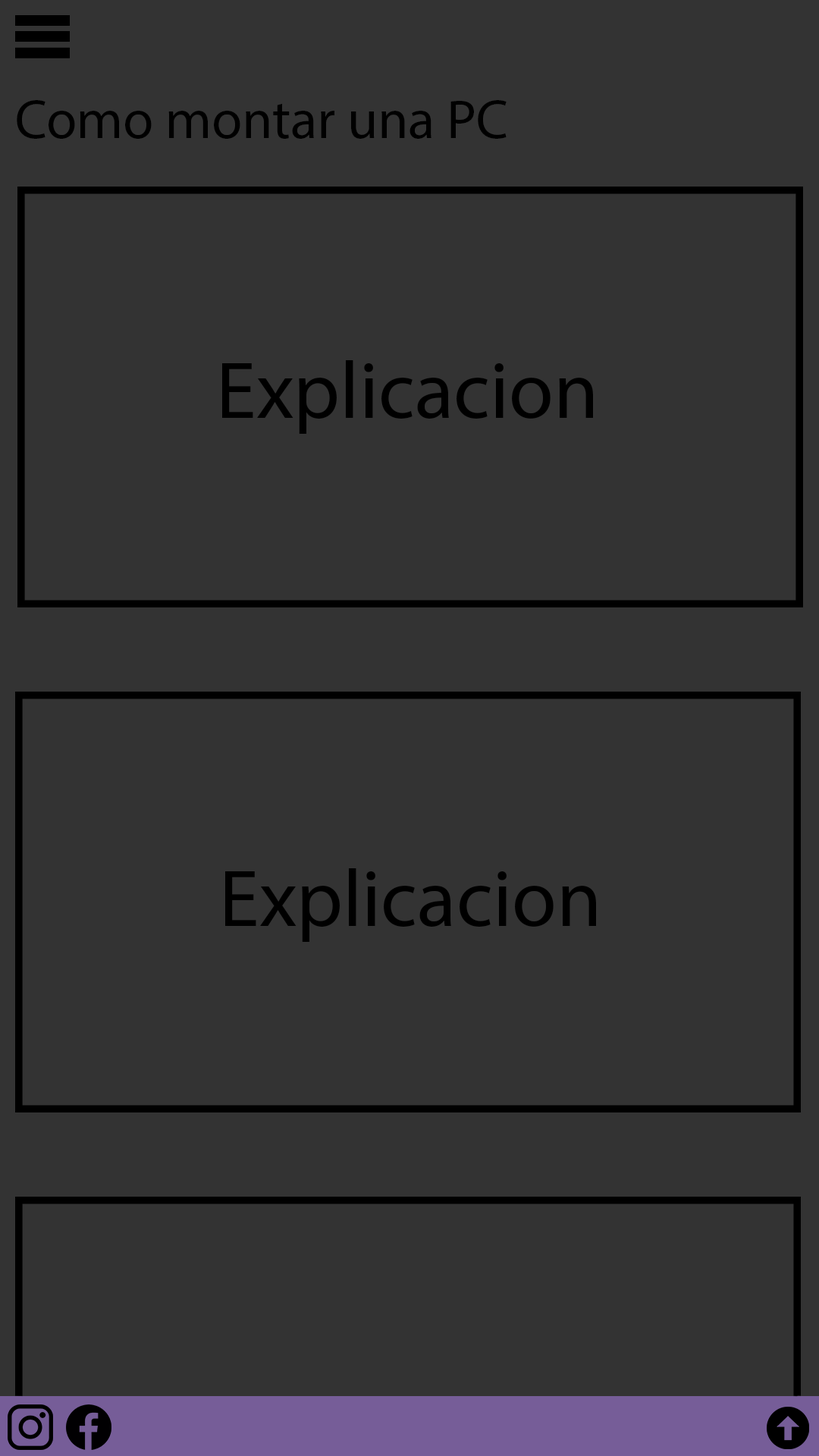
<style>
.page{position:relative;width:819px;height:1456px;background:#333333}
.page>*{position:absolute;margin:0}
.t1{font:55.4px "MyriadPro-Regular";color:#000000}
.t2{font:81.1px "MyriadPro-Regular";color:#000000}
</style>
<div class="page">
<p class="t1" style="left:17px;top:100px;width:490px;height:39px">Como montar una PC</p>
<p class="t2" style="left:222px;top:360px;width:371px;height:74px">Explicacion</p>
<p class="t2" style="left:225px;top:868px;width:371px;height:74px">Explicacion</p>
</div>
